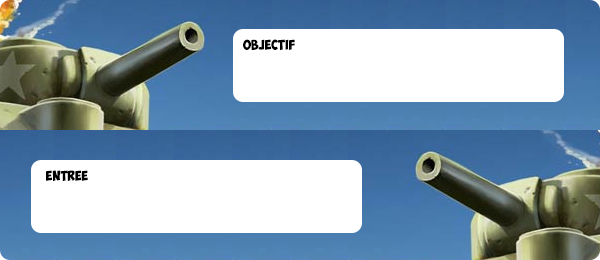
<style>
.page{position:relative;width:600px;height:260px;background:#ffffff}
.page>*{position:absolute;margin:0}
.t1{font:10px "ObelixPro";color:#010000}
</style>
<div class="page">
<p class="t1" style="left:243px;top:39px;width:52px;height:12px">Objectif</p>
<p class="t1" style="left:46px;top:170px;width:42px;height:12px">EntREE</p>
</div>
